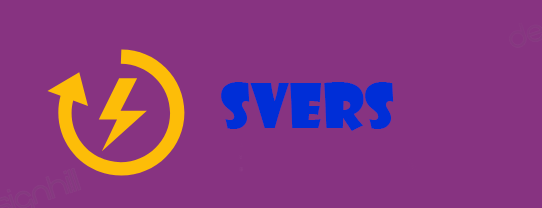
<style>
.page{position:relative;width:542px;height:208px;background:#873381}
.page>*{position:absolute;margin:0}
.t1{font:60px "ShowcardGothic-Reg";color:#002ed7}
</style>
<div class="page">
<p class="t1" style="left:221px;top:82px;width:173px;height:49px">svers</p>
</div>
